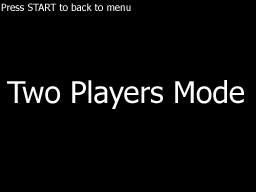
<style>
.page{position:relative;width:256px;height:192px;background:#000000}
.page>*{position:absolute;margin:0}
.t1{font:10px "Tahoma";color:#ffffff}
.t2{font:30px "Tahoma";color:#ffffff}
</style>
<div class="page">
<p class="t1" style="left:1px;top:3px;width:130px;height:8px">Press START to back to menu</p>
<p class="t2" style="left:7px;top:80px;width:237px;height:29px">Two Players Mode</p>
</div>
